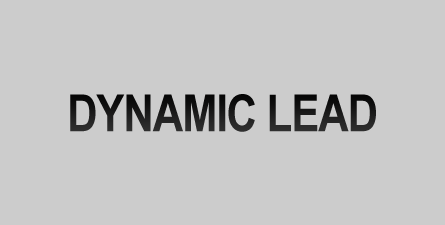
<style>
.page{position:relative;width:445px;height:225px;background:#cccccc}
.page>*{position:absolute;margin:0}
.t1{font:51.3px "ArialNarrow-Bold";letter-spacing:-0.02em;color:#1b1a1a}
</style>
<div class="page">
<p class="t1" style="left:70px;top:94px;width:306px;height:38px">DYNAMIC LEAD</p>
</div>
